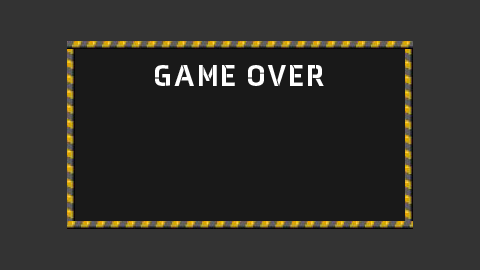
<style>
.page{position:relative;width:480px;height:270px;background:#333333}
.page>*{position:absolute;margin:0}
.t1{font:30px "AxiaStencilBlack-Regular";letter-spacing:0.075em;color:#ffffff}
</style>
<div class="page">
<p class="t1" style="left:155px;top:65px;width:169px;height:21px">GAME OVER</p>
</div>
